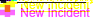
<style>
.page{position:relative;width:93px;height:17px;background:#ffffff}
.page>*{position:absolute;margin:0}
.t1{font:12px "ArialMT"}
</style>
<div class="page">
<p class="t1" style="left:21px;top:4px;width:69px;height:9px">New Incident</p>
</div>
